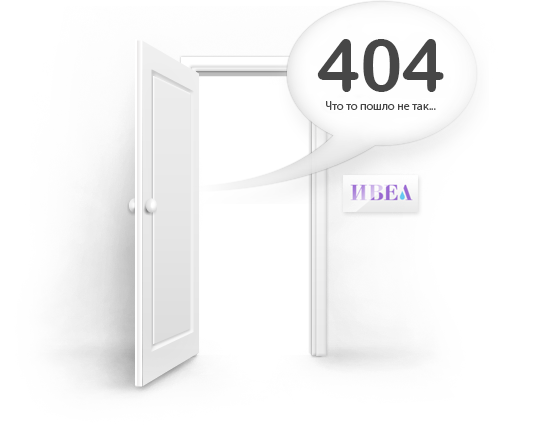
<style>
.page{position:relative;width:533px;height:437px;background:#ffffff}
.page>*{position:absolute;margin:0}
.t1{font:72px "ArialRoundedMTBold";color:#474747}
.t2{font:12px "MyriadPro-Regular";color:#474747}
</style>
<div class="page">
<p class="t1" style="left:317px;top:39px;width:127px;height:53px">404</p>
<p class="t2" style="left:326px;top:101px;width:110px;height:9px">Что то пошло не так...</p>
</div>
